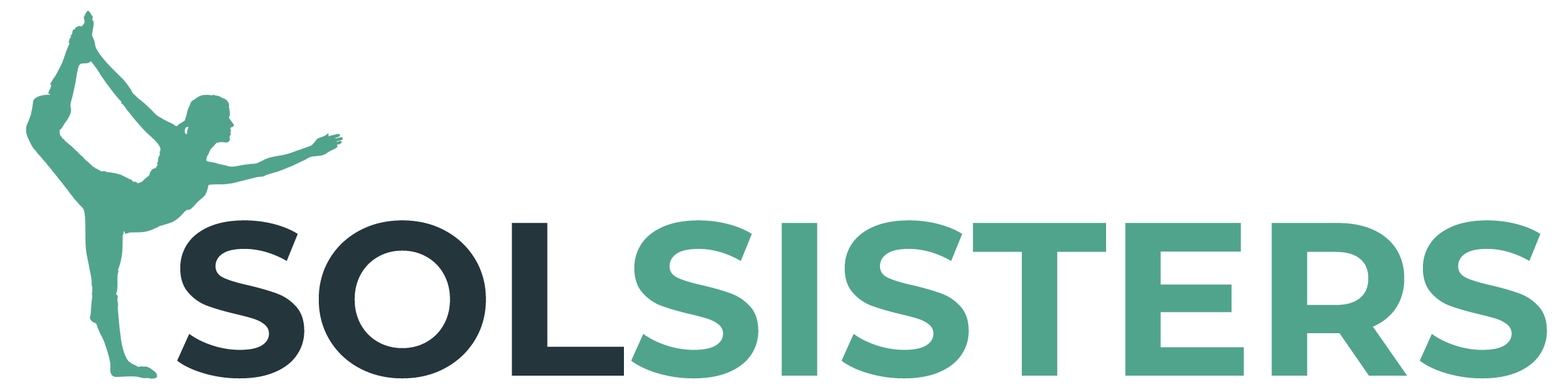
<style>
.page{position:relative;width:1568px;height:392px;background:#ffffff}
.page>*{position:absolute;margin:0}
.t1{font:218px "Montserrat-Bold";color:#50a48c;text-transform:uppercase}
.t2{font:218px "Montserrat-Bold";color:#24353c;text-transform:uppercase}
</style>
<div class="page">
<p class="t1" style="left:177px;top:220px;width:1370px;height:159px"><span class="t2">Sol</span>Sisters</p>
</div>
